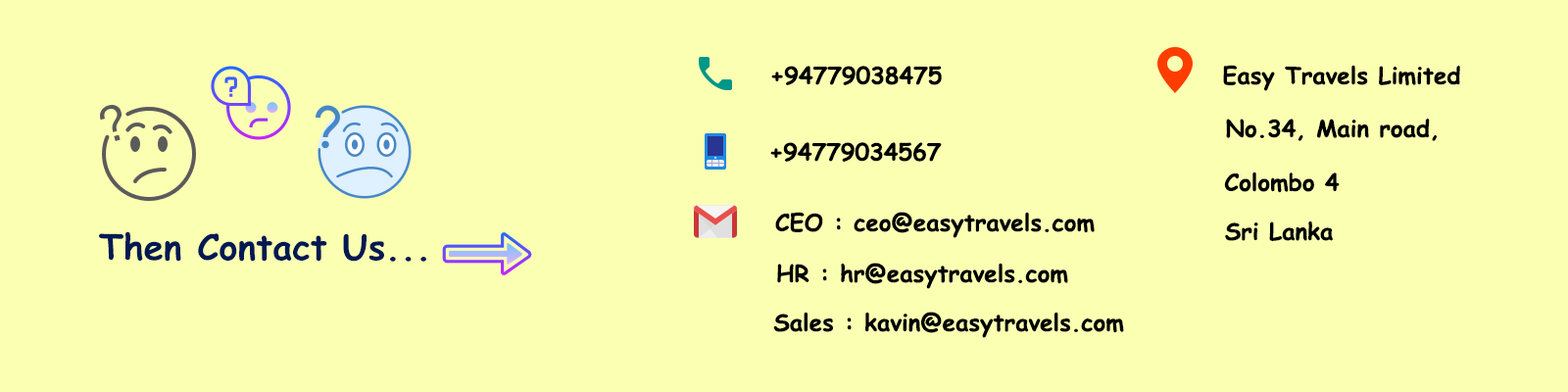
<style>
.page{position:relative;width:1568px;height:392px;background:#fbffb2}
.page>*{position:absolute;margin:0}
.t1{font:23.5px "ComicSansMS-Bold";color:#000000}
.t2{font:35.3px "ComicSansMS-Bold";color:#001953}
</style>
<div class="page">
<p class="t1" style="left:771px;top:66px;width:171px;height:19px">+94779038475</p>
<p class="t1" style="left:1223px;top:65px;width:237px;height:26px">Easy Travels Limited</p>
<p class="t1" style="left:1226px;top:118px;width:212px;height:23px">No.34, Main road,</p>
<p class="t1" style="left:770px;top:142px;width:172px;height:20px">+94779034567</p>
<p class="t1" style="left:1224px;top:172px;width:116px;height:21px">Colombo 4</p>
<p class="t1" style="left:775px;top:212px;width:320px;height:26px">CEO : ceo@easytravels.com</p>
<p class="t1" style="left:1225px;top:220px;width:108px;height:21px">Sri Lanka</p>
<p class="t2" style="left:99px;top:231px;width:327px;height:31px">Then Contact Us...</p>
<p class="t1" style="left:777px;top:263px;width:291px;height:26px">HR : hr@easytravels.com</p>
<p class="t1" style="left:773px;top:312px;width:351px;height:26px">Sales : kavin@easytravels.com</p>
</div>
